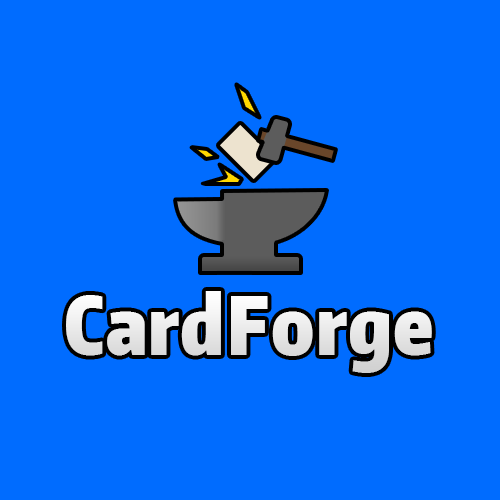
<style>
.page{position:relative;width:500px;height:500px;background:#006cff}
.page>*{position:absolute;margin:0}
.t1{font:79px "EncodeSansCompressed-Black";letter-spacing:0.015em;color:#e8e8e8}
.t2{font:79px "EncodeSansCompressed-Black";letter-spacing:0.035em;color:#e8e8e8}
</style>
<div class="page">
<p class="t1" style="left:66px;top:291px;width:366px;height:82px">Car<span class="t2">dF</span>orge</p>
</div>
